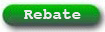
<style>
.page{position:relative;width:105px;height:32px}
.page>*{position:absolute;margin:0}
.t1{font:16px "Courier-Bold";color:#ebebeb}
</style>
<div class="page">
<p class="t1" style="left:24px;top:9px;width:57px;height:10px">Rebate</p>
</div>
